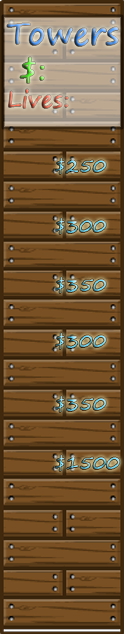
<style>
.page{position:relative;width:124px;height:634px}
.page>*{position:absolute;margin:0}
.t1{font:30px "SegoePrint";letter-spacing:0.001em;font-weight:bold}
.t2{font:22px "SegoePrint";letter-spacing:0.001em;font-weight:bold}
.t3{font:18px "SegoePrint";letter-spacing:0.001em;font-weight:bold}
</style>
<div class="page">
<p class="t1" style="left:6px;top:23px;width:113px;height:86px">Towers<br> $:<br><span class="t2">Lives:</span></p>
<p class="t3" style="left:55px;top:158px;width:52px;height:17px">$250</p>
<p class="t3" style="left:55px;top:218px;width:52px;height:17px">$300</p>
<p class="t3" style="left:55px;top:277px;width:52px;height:17px">$350</p>
<p class="t3" style="left:55px;top:333px;width:52px;height:17px">$300</p>
<p class="t3" style="left:55px;top:396px;width:52px;height:17px">$350</p>
<p class="t3" style="left:55px;top:455px;width:65px;height:17px">$1500</p>
</div>
